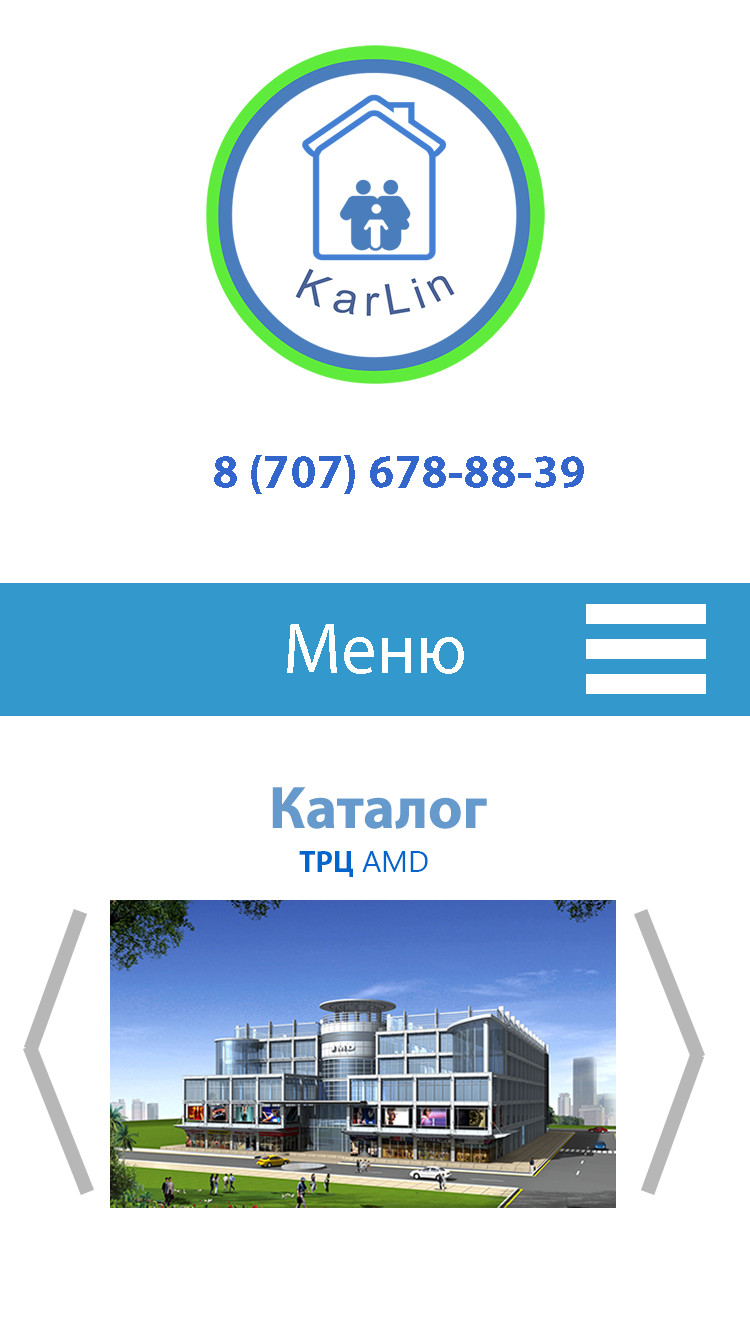
<style>
.page{position:relative;width:750px;height:1334px;background:#ffffff}
.page>*{position:absolute;margin:0}
.t1{font:48px "MyriadPro-Bold";color:#3366cc}
.t2{font:72px "MyriadPro-Regular";color:#ffffff}
.t3{font:60px "MyriadPro-Bold";color:#6699cc}
.t4{font:30px "MyriadPro-Bold";color:#0066cc}
.t5{font:30px "MyanmarText";color:#0066cc}
</style>
<div class="page">
<p class="t1" style="left:214px;top:455px;width:370px;height:39px">8 (707) 678-88-39</p>
<p class="t2" style="left:287px;top:624px;width:177px;height:50px">Меню</p>
<p class="t3" style="left:272px;top:787px;width:215px;height:42px">Каталог</p>
<p class="t4" style="left:299px;top:851px;width:129px;height:26px">ТРЦ<span class="t5"> AMD</span></p>
</div>
